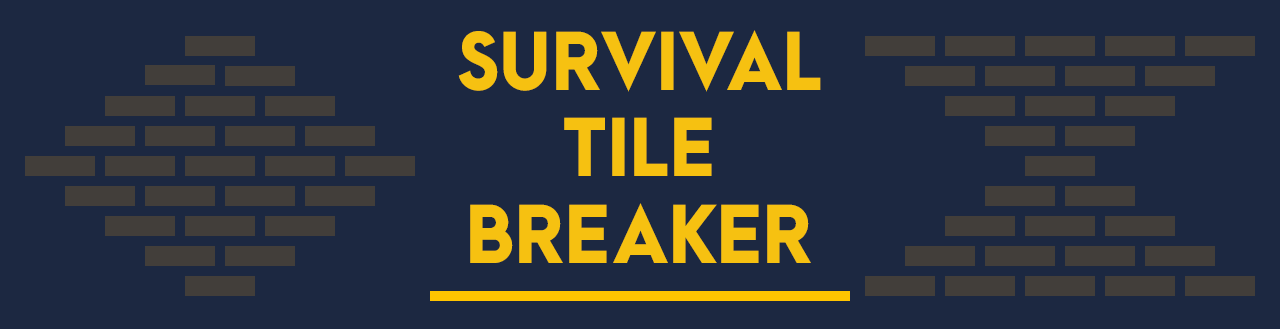
<style>
.page{position:relative;width:1280px;height:329px;background:#1c2841}
.page>*{position:absolute;margin:0}
.t1{font:72px "ArcaMajora3-Heavy";color:#f6c111}
</style>
<div class="page">
<p class="t1" style="left:458px;top:30px;width:363px;height:233px;text-align:center">SURVIVAL<br>TILE<br>BREAKER</p>
</div>
